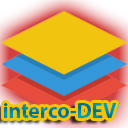
<style>
.page{position:relative;width:128px;height:128px;background:#f1c40f}
.page>*{position:absolute;margin:0}
.t1{font:21.3px "MyriadPro-Bold";color:#008299}
</style>
<div class="page">
<p class="t1" style="left:4px;top:103px;width:113px;height:15px">interco-DEV</p>
</div>
